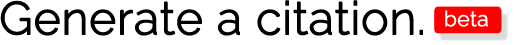
<style>
.page{position:relative;width:519px;height:45px;background:#ffffff}
.page>*{position:absolute;margin:0}
.t1{font:45.8px "Raleway-Light";color:#000000;font-weight:bold}
.t2{font:20.9px "Raleway-Light";color:#ffffff;font-weight:bold}
</style>
<div class="page">
<p class="t1" style="left:0px;top:0px;width:423px;height:36px">Generate a citation.</p>
<p class="t2" style="left:445px;top:10px;width:43px;height:17px">beta</p>
</div>
